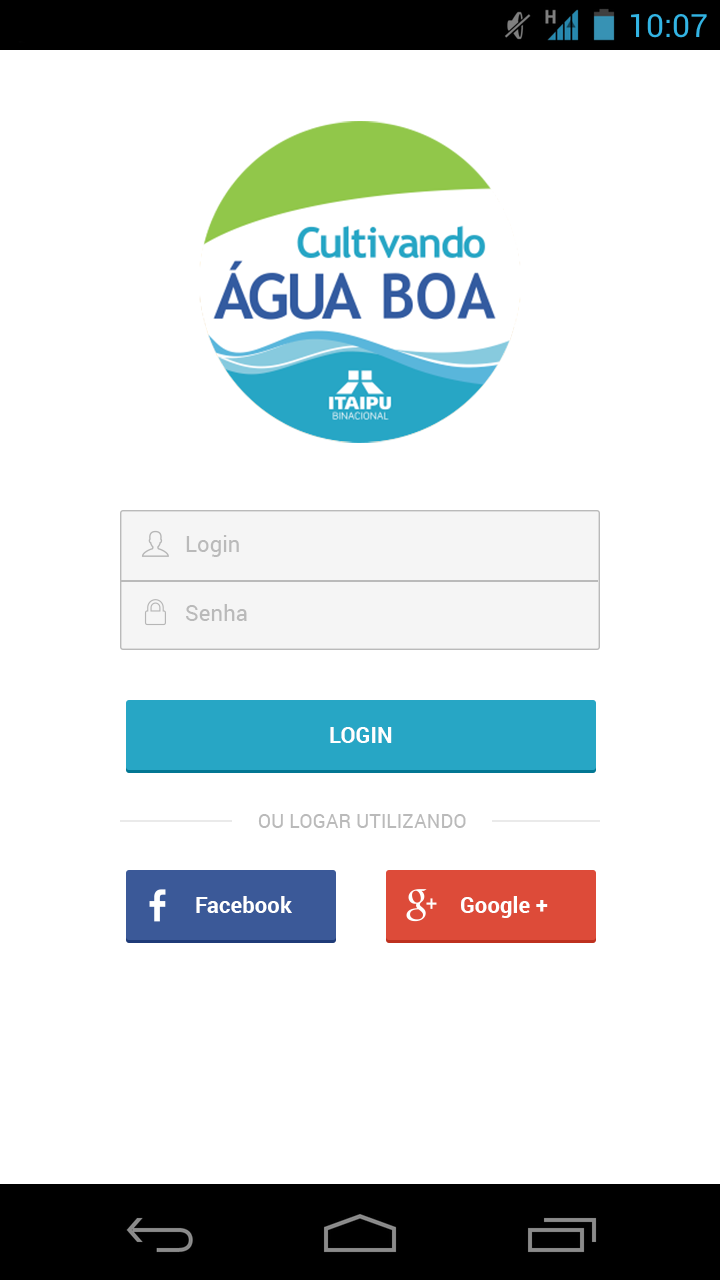
<style>
.page{position:relative;width:720px;height:1280px;background:#ffffff}
.page>*{position:absolute;margin:0}
.t1{font:22.2px "Roboto-Regular";color:#bababa}
.t2{font:22.2px "Roboto-Bold";color:#ffffff}
.t3{font:19.4px "Roboto-Regular";color:#bababa;text-transform:uppercase}
</style>
<div class="page">
<p class="t1" style="left:186px;top:535px;width:53px;height:22px">Login</p>
<p class="t1" style="left:186px;top:604px;width:61px;height:17px">Senha</p>
<p class="t2" style="left:330px;top:727px;width:62px;height:16px">LOGIN</p>
<p class="t3" style="left:258px;top:814px;width:208px;height:14px">Ou logar utilizando</p>
<p class="t2" style="left:196px;top:896px;width:96px;height:17px">Facebook</p>
<p class="t2" style="left:461px;top:896px;width:87px;height:22px">Google +</p>
</div>
